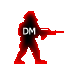
<style>
.page{position:relative;width:64px;height:64px;background:#ffffff}
.page>*{position:absolute;margin:0}
.t1{font:9px "Tahoma";color:#ffffff}
</style>
<div class="page">
<p class="t1" style="left:23px;top:27px;width:13px;height:8px">DM</p>
</div>
